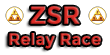
<style>
.page{position:relative;width:110px;height:55px;background:#ffffff}
.page>*{position:absolute;margin:0}
.t1{font:24px "Montserrat-Regular";color:#de2c26;font-weight:bold}
.t2{font:16px "Montserrat-Regular";font-weight:bold}
</style>
<div class="page">
<p class="t1" style="left:30px;top:6px;width:50px;height:18px">ZSR</p>
<p class="t2" style="left:9px;top:33px;width:92px;height:16px">Relay Race</p>
</div>
